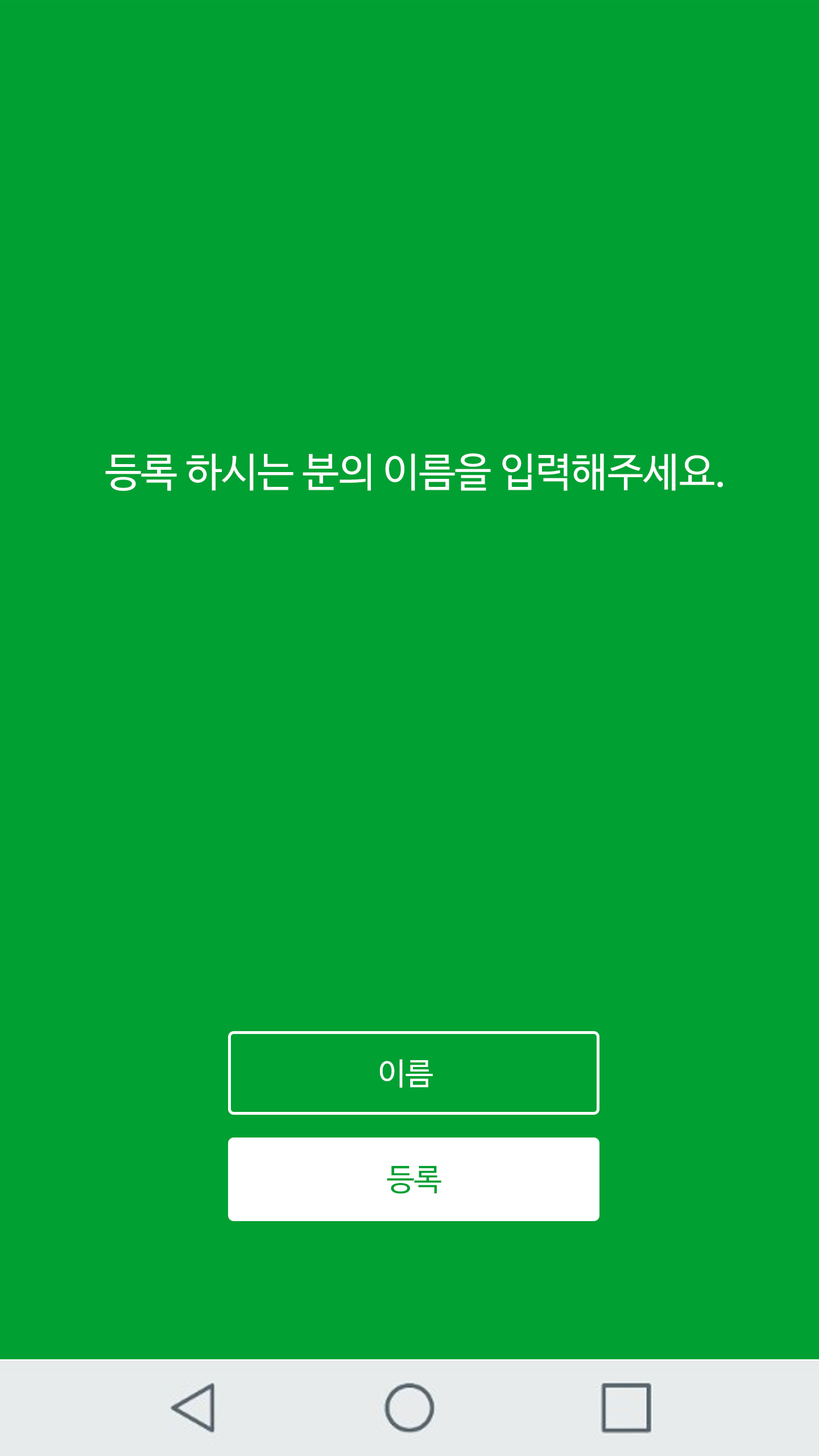
<style>
.page{position:relative;width:819px;height:1456px;background:#01a032}
.page>*{position:absolute;margin:0}
.t1{font:40.3px "NanumBarunGothicOTF";color:#ffffff}
.t2{font:30.8px "NanumBarunGothicOTF";color:#ffffff}
.t3{font:30.8px "NanumBarunGothicOTF";color:#01a032}
</style>
<div class="page">
<p class="t1" style="left:105px;top:453px;width:618px;height:38px">등록 하시는 분의 이름을 입력해주세요.</p>
<p class="t2" style="left:379px;top:1059px;width:54px;height:29px">이름</p>
<p class="t3" style="left:387px;top:1166px;width:54px;height:28px">등록</p>
</div>
